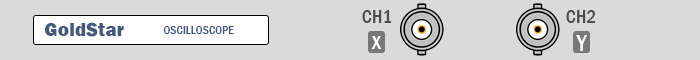
<style>
.page{position:relative;width:700px;height:60px;background:#dadada}
.page>*{position:absolute;margin:0}
.t1{font:19.4px "FranklinGothic-MediumCond";color:#4e4e4e}
.t2{font:19.4px "FranklinGothic-Heavy";color:#445a7c}
.t3{font:12.2px "FranklinGothic-MediumCond";color:#445a7c}
.t4{font:25px "FranklinGothic-MediumCond";color:#ffffff}
.t5{font:23.1px "FranklinGothic-MediumCond";color:#ffffff}
</style>
<div class="page">
<p class="t1" style="left:362px;top:10px;width:30px;height:13px">CH1</p>
<p class="t1" style="left:566px;top:10px;width:30px;height:13px">CH2</p>
<p class="t2" style="left:45px;top:22px;width:79px;height:15px">GoldStar</p>
<p class="t3" style="left:163px;top:26px;width:71px;height:8px">OSCILLOSCOPE</p>
<p class="t4" style="left:371px;top:36px;width:11px;height:13px">x</p>
<p class="t5" style="left:576px;top:35px;width:11px;height:16px">Y</p>
</div>
